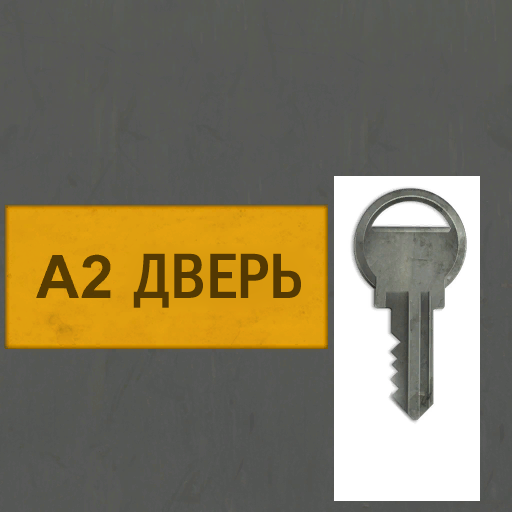
<style>
.page{position:relative;width:512px;height:512px}
.page>*{position:absolute;margin:0}
.t1{font:64px "FranklinGothicMediCondSCC";color:#543902}
</style>
<div class="page">
<p class="t1" style="left:133px;top:253px;width:168px;height:55px">ДВЕРЬ</p>
</div>
